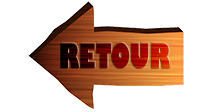
<style>
.page{position:relative;width:200px;height:112px;background:#ffffff}
.page>*{position:absolute;margin:0}
.t1{font:33.2px "GillSans-UltraBoldCondensed"}
</style>
<div class="page">
<p class="t1" style="left:60px;top:42px;width:110px;height:27px">RETOUR</p>
</div>
